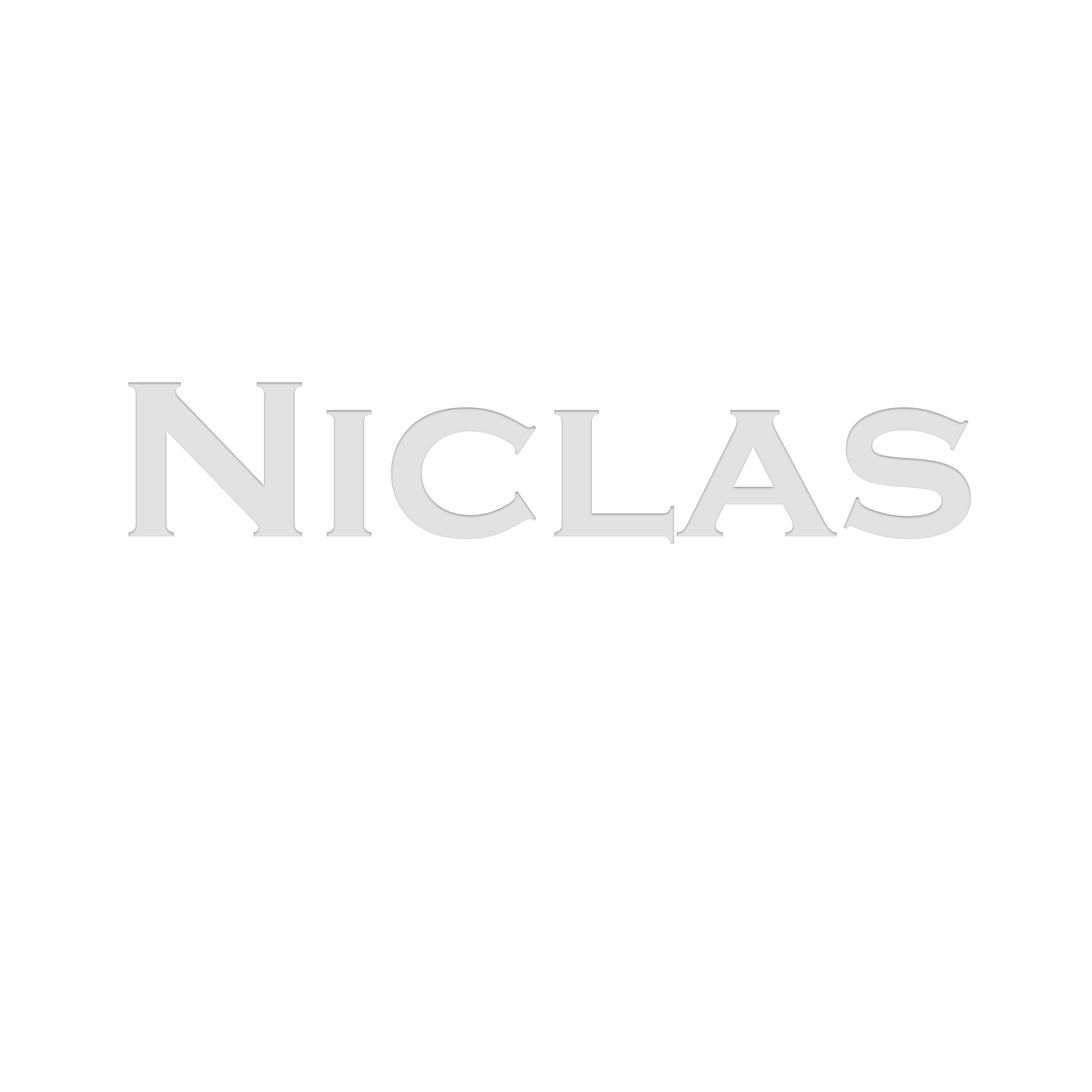
<style>
.page{position:relative;width:1092px;height:1092px;background:#ffffff}
.page>*{position:absolute;margin:0}
.t1{font:230.9px "CopperplateGothic-Bold";color:#e2e2e2}
</style>
<div class="page">
<p class="t1" style="left:128px;top:382px;width:843px;height:162px">Niclas</p>
</div>
